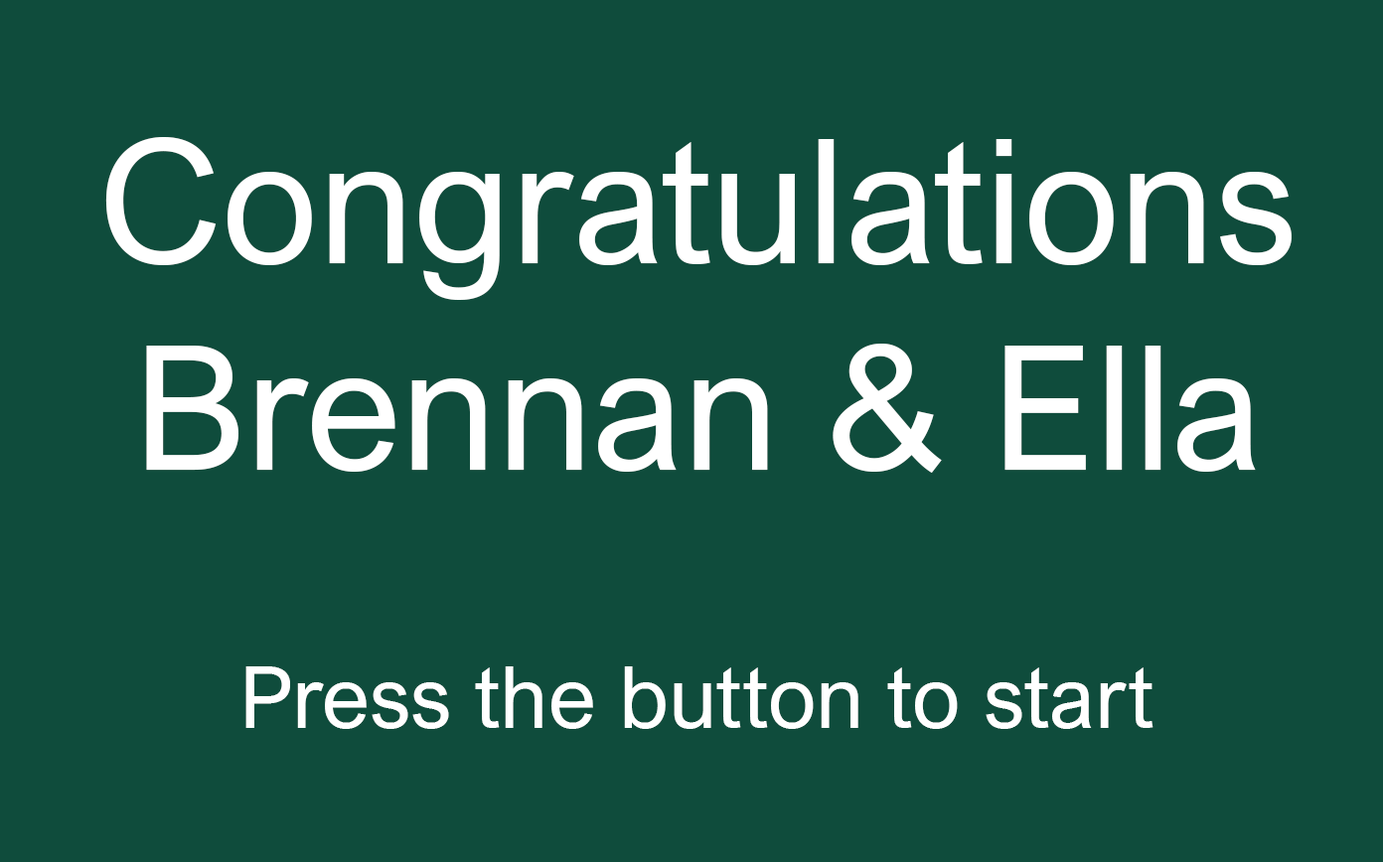
<style>
.page{position:relative;width:1383px;height:862px;background:#0f4c3c}
.page>*{position:absolute;margin:0}
.t1{font:172.5px "ArialNovaW07-Regular";color:#ffffff}
.t2{font:86.2px "ArialNovaW07-Regular";color:#ffffff}
</style>
<div class="page">
<p class="t1" style="left:105px;top:137px;width:1186px;height:336px;text-align:center">Congratulations<br>Brennan &amp; Ella</p>
<p class="t2" style="left:245px;top:667px;width:908px;height:62px">Press the button to start</p>
</div>
